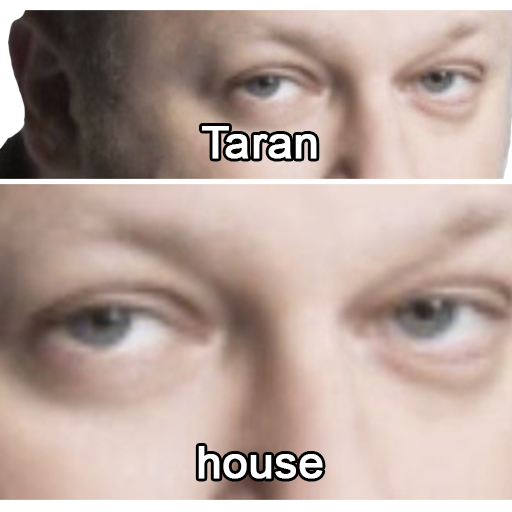
<style>
.page{position:relative;width:512px;height:512px}
.page>*{position:absolute;margin:0}
.t1{font:45px "ArialMT";color:#ffffff;font-weight:bold}
</style>
<div class="page">
<p class="t1" style="left:202px;top:126px;width:115px;height:33px">Taran</p>
<p class="t1" style="left:198px;top:446px;width:125px;height:33px">house</p>
</div>
